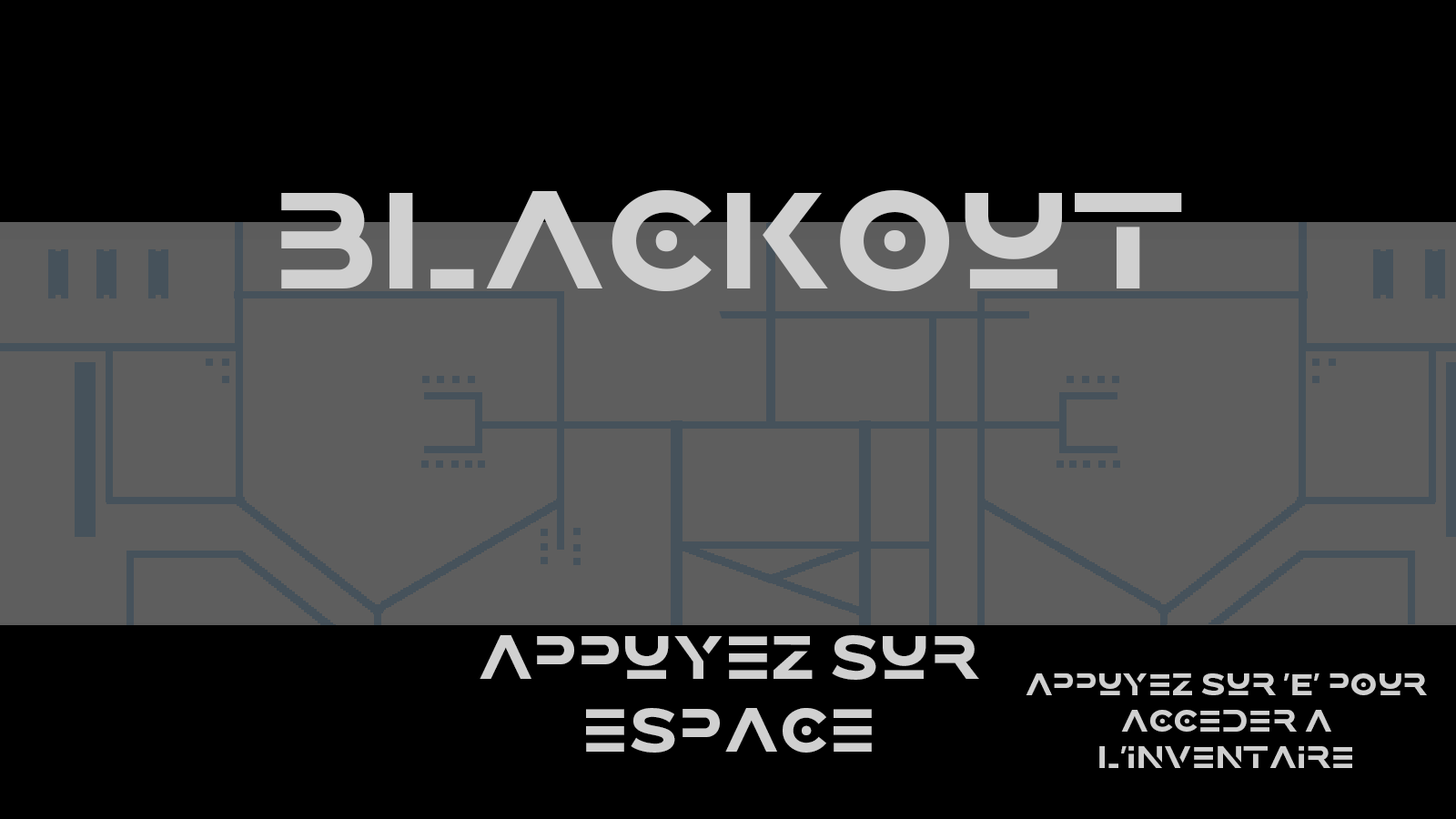
<style>
.page{position:relative;width:1456px;height:819px;background:#000000}
.page>*{position:absolute;margin:0}
.t1{font:136.5px "Brolink-DEMO";color:#d0d0d0}
.t2{font:60.7px "Brolink-DEMO";color:#d0d0d0}
.t3{font:30.3px "Brolink-DEMO";color:#d0d0d0}
</style>
<div class="page">
<p class="t1" style="left:281px;top:190px;width:901px;height:101px">blackout</p>
<p class="t2" style="left:480px;top:635px;width:499px;height:118px;text-align:center">appuyez sur espace</p>
<p class="t3" style="left:1026px;top:673px;width:401px;height:95px;text-align:center">appuyez sur 'E' pour acceder a l'inventaire</p>
</div>
